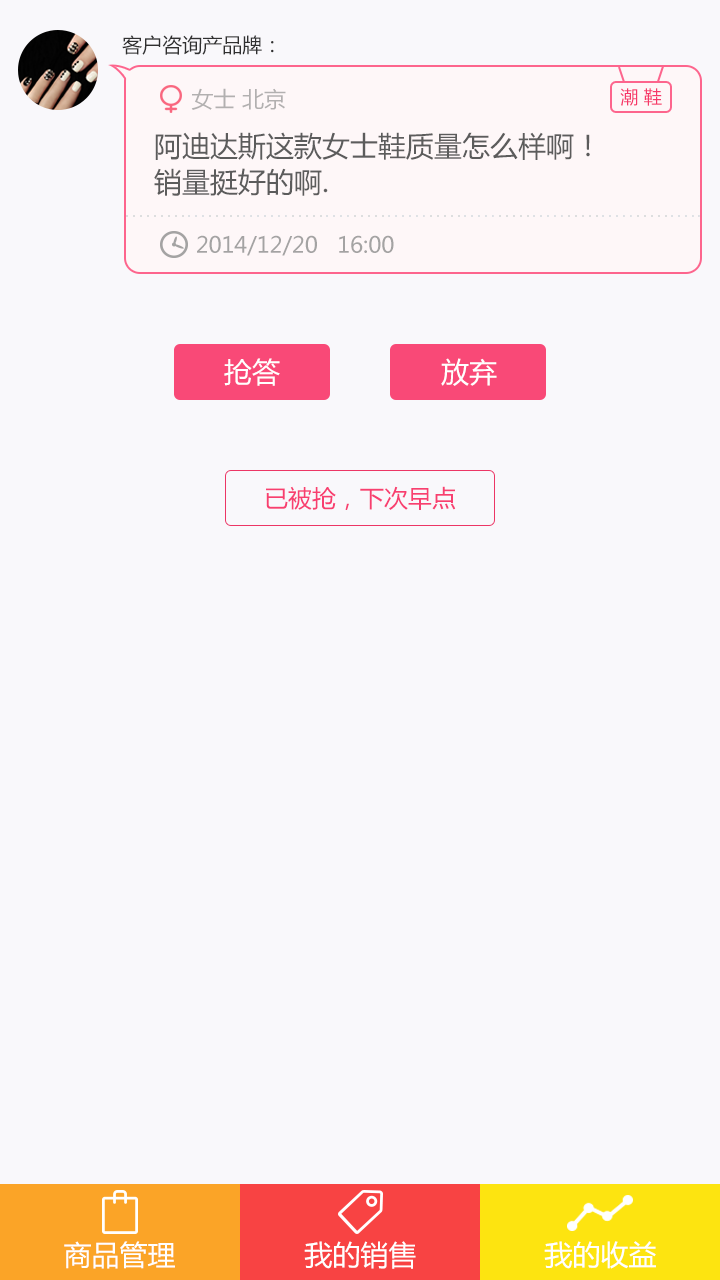
<style>
.page{position:relative;width:720px;height:1280px;background:#f9f8fb}
.page>*{position:absolute;margin:0}
.t1{font:20px "MicrosoftYaHei";color:#303030}
.t2{font:22px "MicrosoftYaHei";color:#b2b0b0}
.t3{font:18px "MicrosoftYaHei";color:#f6386a}
.t4{font:28px/36px "MicrosoftYaHei";color:#5c5c5c}
.t5{font:22px "MicrosoftYaHei";color:#a4a3a3}
.t6{font:28px "MicrosoftYaHei";color:#ffffff}
.t7{font:24px "MicrosoftYaHei";color:#f83f70}
</style>
<div class="page">
<p class="t1" style="left:122px;top:35px;width:152px;height:20px">客户咨询产品牌：</p>
<p class="t2" style="left:191px;top:88px;width:95px;height:22px">女士 北京</p>
<p class="t3" style="left:620px;top:88px;width:42px;height:18px">潮 鞋</p>
<p class="t4" style="left:154px;top:132px;width:436px;height:64px">阿迪达斯这款女士鞋质量怎么样啊！<br>销量挺好的啊.</p>
<p class="t5" style="left:197px;top:235px;width:197px;height:21px">2014/12/20   16:00</p>
<p class="t6" style="left:224px;top:358px;width:56px;height:28px">抢答</p>
<p class="t6" style="left:441px;top:358px;width:56px;height:28px">放弃</p>
<p class="t7" style="left:266px;top:486px;width:190px;height:24px">已被抢，下次早点</p>
<p class="t6" style="left:64px;top:1241px;width:111px;height:28px">商品管理</p>
<p class="t6" style="left:304px;top:1241px;width:112px;height:28px">我的销售</p>
<p class="t6" style="left:544px;top:1241px;width:112px;height:28px">我的收益</p>
</div>
